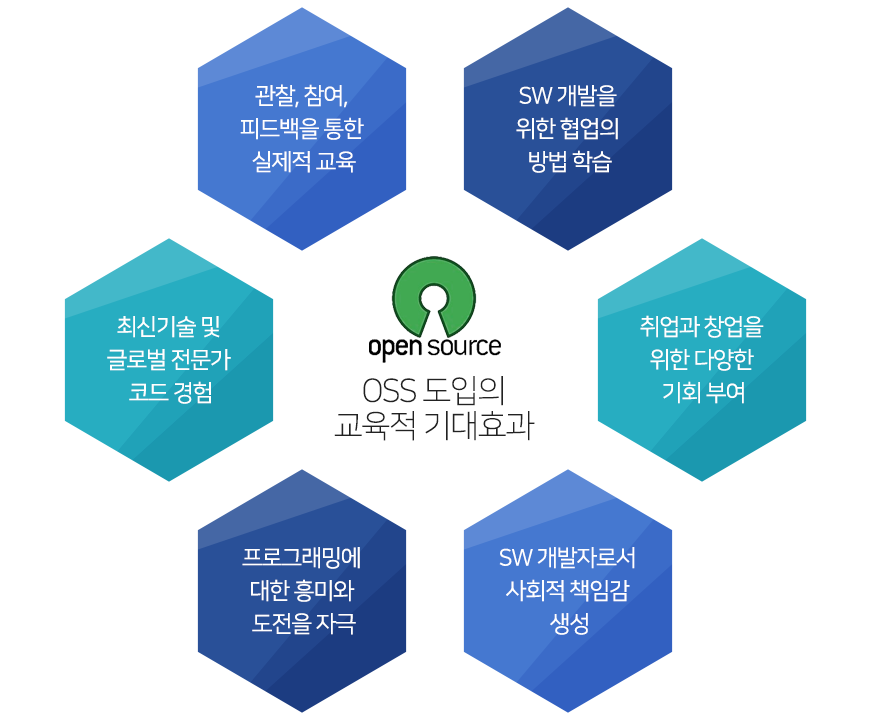
<style>
.page{position:relative;width:870px;height:720px;background:#ffffff}
.page>*{position:absolute;margin:0}
.t1{font:23px/33px "NanumSquareR";letter-spacing:-0.05em;color:#ffffff}
.t2{font:32px/35px "NanumSquareL";letter-spacing:-0.05em;color:#222222}
</style>
<div class="page">
<p class="t1" style="left:240px;top:84px;width:124px;height:89px;text-align:center">관찰, 참여, <br>피드백을 통한 <br>실제적 교육</p>
<p class="t1" style="left:516px;top:85px;width:102px;height:88px;text-align:center">SW 개발을 <br>위한 협업의 <br>방법 학습</p>
<p class="t1" style="left:107px;top:316px;width:124px;height:88px;text-align:center">최신기술 및 <br>글로벌 전문가 <br>코드 경험</p>
<p class="t1" style="left:640px;top:315px;width:124px;height:89px;text-align:center">취업과 창업을 <br>위한 다양한 <br>기회 부여</p>
<p class="t2" style="left:334px;top:376px;width:201px;height:65px;text-align:center">OSS 도입의<br>교육적 기대효과</p>
<p class="t1" style="left:242px;top:547px;width:118px;height:88px;text-align:center">프로그래밍에 <br>대한 흥미와 <br>도전을 자극</p>
<p class="t1" style="left:499px;top:547px;width:136px;height:88px;text-align:center">SW 개발자로서 <br>사회적 책임감 <br>생성</p>
</div>
